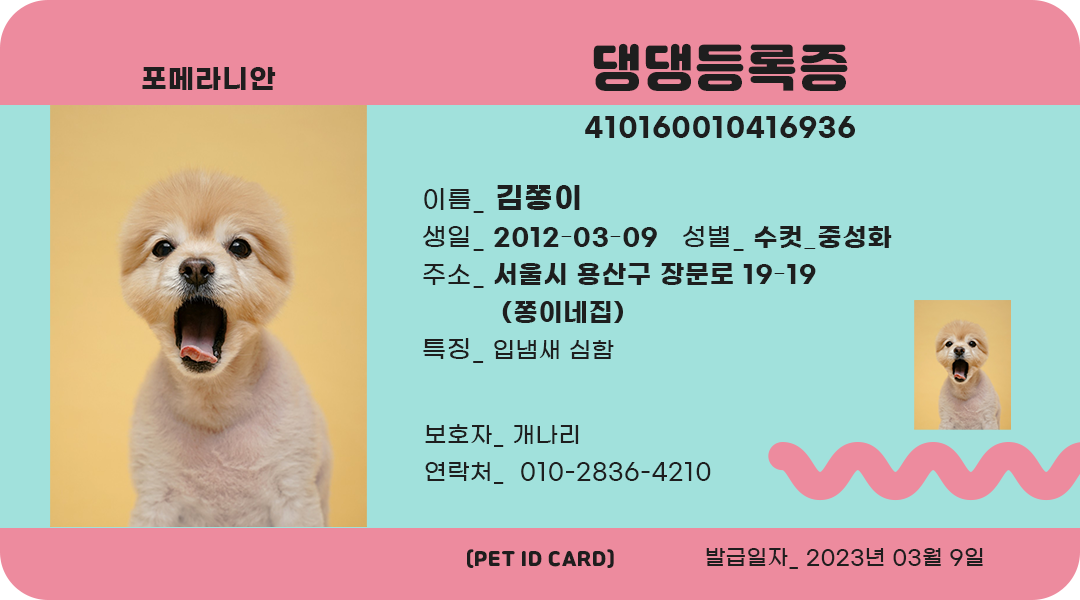
<style>
.page{position:relative;width:1080px;height:600px;background:#a1e1dc}
.page>*{position:absolute;margin:0}
.t1{font:50px "JalnanOTF";letter-spacing:0.04em;color:#1e1e1e}
.t2{font:27.1px "GmarketSansTTFBold";letter-spacing:0.04em;color:#1e1e1e}
.t3{font:25px/37.5px "GmarketSansTTFBold";letter-spacing:0.04em;color:#1e1e1e}
.t4{font:25px/41.7px "GmarketSansTTFMedium";letter-spacing:0.04em;color:#1e1e1e}
.t5{font:29.2px/41.7px "GmarketSansTTFBold";letter-spacing:0.04em;color:#1e1e1e}
.t6{font:25px/37.5px "GmarketSansTTFMedium";letter-spacing:0.04em;color:#1e1e1e}
.t7{font:22.9px/37.5px "GmarketSansTTFMedium";letter-spacing:0.04em;color:#1e1e1e}
.t8{font:18.8px "JalnanOTF";letter-spacing:0.04em;color:#1e1e1e}
.t9{font:20.8px "GmarketSansTTFMedium";letter-spacing:0.04em;color:#1e1e1e}
</style>
<div class="page">
<p class="t1" style="left:593px;top:43px;width:255px;height:48px">댕댕등록증</p>
<p class="t2" style="left:142px;top:67px;width:134px;height:23px">포메라니안</p>
<p class="t2" style="left:585px;top:116px;width:270px;height:22px">410160010416936</p>
<p class="t3" style="left:423px;top:185px;width:469px;height:178px"><span class="t4">이름_ </span><span class="t5">김쫑이<br></span><span class="t6">생일_ </span>2012-03-09<span class="t6">  성별_ </span>수컷_중성화<br><span class="t6">주소_ </span>서울시 용산구 장문로 19-19<br>   (쫑이네집)<br><span class="t6">특징_</span><span class="t7"> 입냄새 심함</span></p>
<p class="t7" style="left:425px;top:424px;width:286px;height:60px">보호자_ 개나리<br>연락처_  010-2836-4210</p>
<p class="t8" style="left:467px;top:549px;width:147px;height:19px">(PET ID CARD)</p>
<p class="t9" style="left:706px;top:548px;width:277px;height:21px">발급일자_ 2023년 03월 9일</p>
</div>
